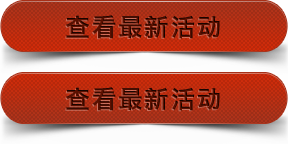
<style>
.page{position:relative;width:288px;height:144px}
.page>*{position:absolute;margin:0}
.t1{font:24px "HiraginoSansGB-W6";letter-spacing:0.1em;color:#490d00}
</style>
<div class="page">
<p class="t1" style="left:66px;top:15px;width:154px;height:24px">查看最新活动</p>
<p class="t1" style="left:66px;top:87px;width:154px;height:24px">查看最新活动</p>
</div>
